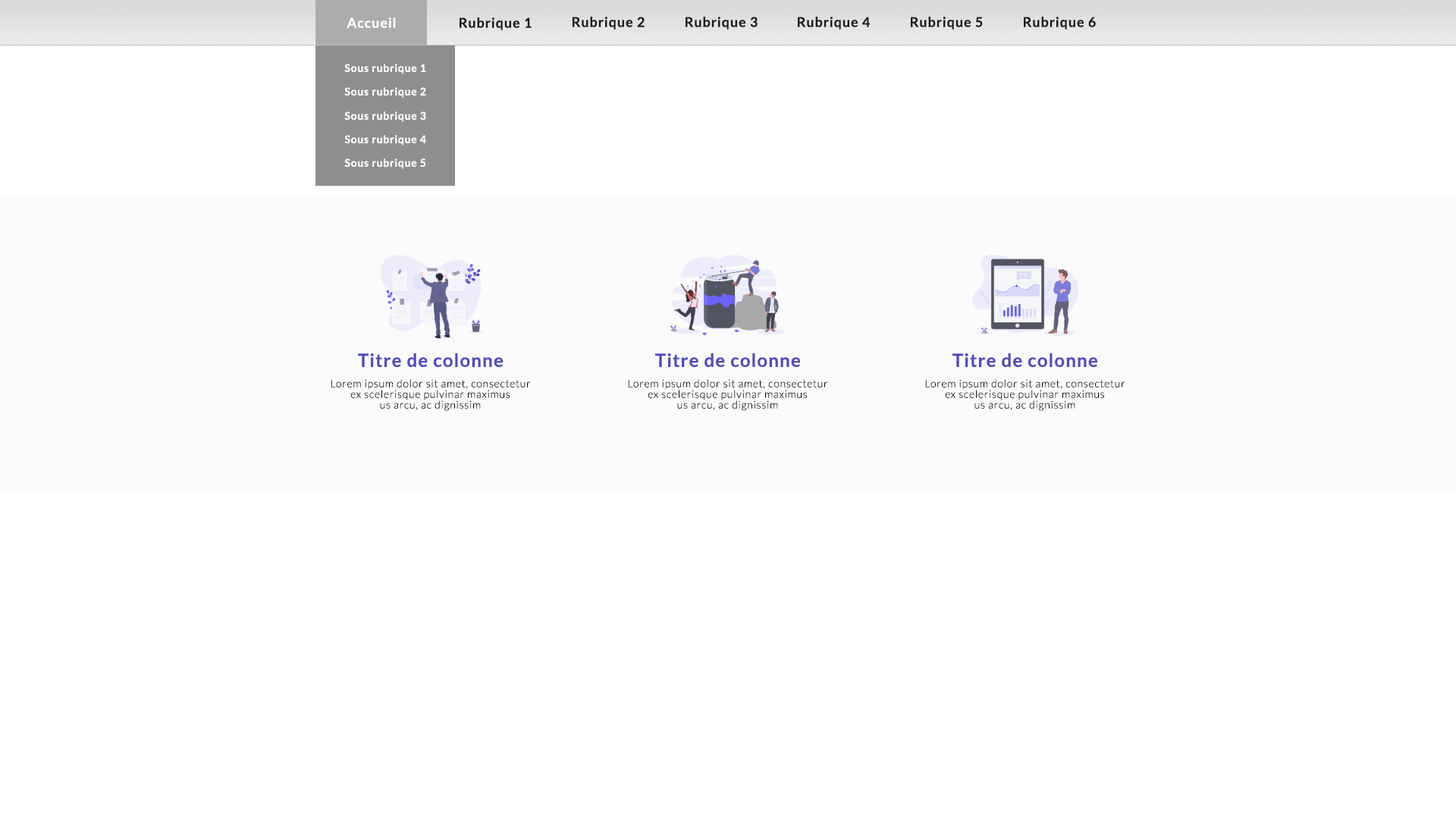
<style>
.page{position:relative;width:1456px;height:819px;background:#ffffff}
.page>*{position:absolute;margin:0}
.t1{font:13.6px "Lato-Bold";letter-spacing:0.05em;color:#ffffff}
.t2{font:13.6px "Lato-Bold";letter-spacing:0.05em;color:#191919}
.t3{font:10.6px "Lato-Bold";letter-spacing:0.05em;color:#ffffff}
.t4{font:18.2px "Lato-Bold";letter-spacing:0.05em;color:#514abf}
.t5{font:10.6px/10.6px "Lato-Light";letter-spacing:0.05em;color:#000000}
</style>
<div class="page">
<p class="t1" style="left:347px;top:17px;width:49px;height:11px">Accueil</p>
<p class="t2" style="left:460px;top:17px;width:72px;height:13px">Rubrique 1</p>
<p class="t2" style="left:573px;top:17px;width:72px;height:13px">Rubrique 2</p>
<p class="t2" style="left:686px;top:17px;width:72px;height:13px">Rubrique 3</p>
<p class="t2" style="left:798px;top:17px;width:72px;height:13px">Rubrique 4</p>
<p class="t2" style="left:911px;top:17px;width:72px;height:13px">Rubrique 5</p>
<p class="t2" style="left:1024px;top:17px;width:72px;height:13px">Rubrique 6</p>
<p class="t3" style="left:344px;top:64px;width:82px;height:10px">Sous rubrique 1</p>
<p class="t3" style="left:344px;top:87px;width:82px;height:11px">Sous rubrique 2</p>
<p class="t3" style="left:344px;top:111px;width:82px;height:11px">Sous rubrique 3</p>
<p class="t3" style="left:344px;top:135px;width:82px;height:11px">Sous rubrique 4</p>
<p class="t3" style="left:344px;top:158px;width:82px;height:11px">Sous rubrique 5</p>
<p class="t4" style="left:358px;top:353px;width:145px;height:14px">Titre de colonne</p>
<p class="t4" style="left:655px;top:353px;width:145px;height:14px">Titre de colonne</p>
<p class="t4" style="left:952px;top:353px;width:145px;height:14px">Titre de colonne</p>
<p class="t5" style="left:331px;top:379px;width:200px;height:32px;text-align:center">Lorem ipsum dolor sit amet, consectetur<br>ex scelerisque pulvinar maximus<br>us arcu, ac dignissim</p>
<p class="t5" style="left:628px;top:379px;width:200px;height:32px;text-align:center">Lorem ipsum dolor sit amet, consectetur<br>ex scelerisque pulvinar maximus<br>us arcu, ac dignissim</p>
<p class="t5" style="left:925px;top:379px;width:200px;height:32px;text-align:center">Lorem ipsum dolor sit amet, consectetur<br>ex scelerisque pulvinar maximus<br>us arcu, ac dignissim</p>
</div>
